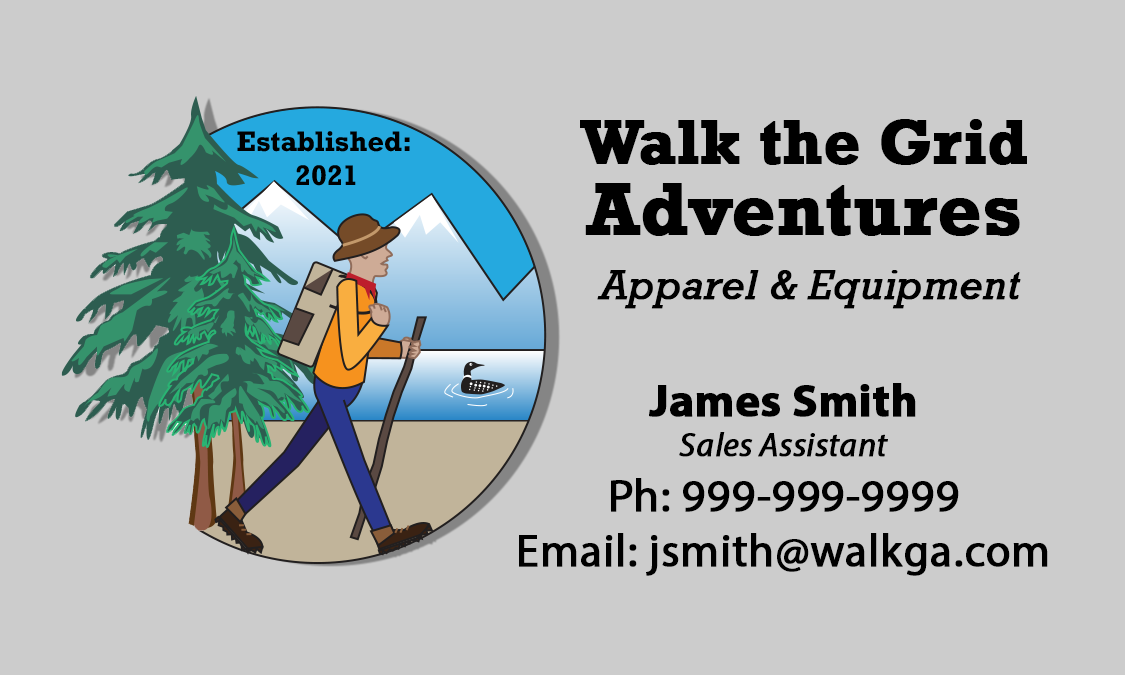
<style>
.page{position:relative;width:1125px;height:675px;background:#cccccc}
.page>*{position:absolute;margin:0}
.t1{font:62.5px/70.8px "Rockwell-Bold";color:#000000;font-weight:bold}
.t2{font:75px/70.8px "Rockwell-Bold";color:#000000;font-weight:bold}
.t3{font:41.7px "Rockwell-Italic";color:#000000;font-weight:bold}
.t4{font:45.8px "MyriadPro-Regular";color:#000000;font-weight:bold}
.t5{font:45.8px "MyriadPro-Bold";color:#000000;font-weight:bold}
.t6{font:33.3px "MyriadPro-It";color:#000000;font-weight:bold}
</style>
<div class="page">
<p class="t1" style="left:580px;top:119px;width:447px;height:117px;text-align:center">Walk the Grid<br><span class="t2">Adventures</span></p>
<p class="t3" style="left:597px;top:270px;width:424px;height:39px">Apparel &amp; Equipment</p>
<p class="t4" style="left:519px;top:383px;width:529px;height:193px;text-align:center"><span class="t5">James Smith<br></span><span class="t6">Sales Assistant<br></span>Ph: 999-999-9999<br>Email: jsmith@walkga.com</p>
</div>
